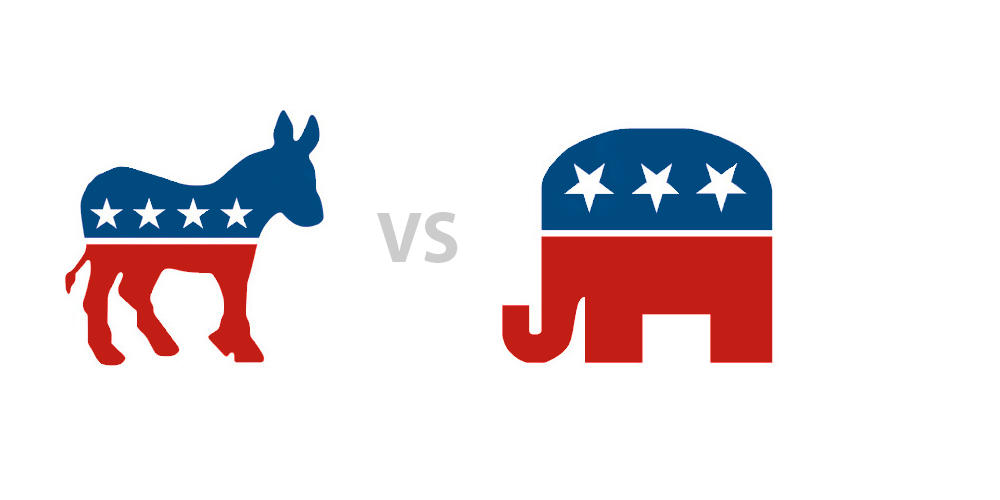
<style>
.page{position:relative;width:1000px;height:500px;background:#ffffff}
.page>*{position:absolute;margin:0}
.t1{font:72px "MyriadPro-Bold";color:#cccccc}
</style>
<div class="page">
<p class="t1" style="left:377px;top:212px;width:81px;height:51px">VS</p>
</div>
